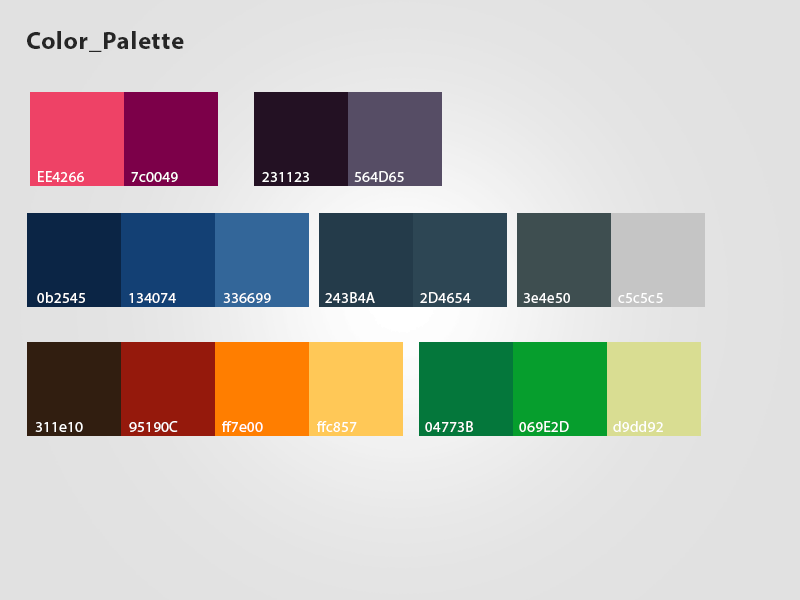
<style>
.page{position:relative;width:800px;height:600px}
.page>*{position:absolute;margin:0}
.t1{font:25px "MyriadPro-Bold";letter-spacing:0.025em;color:#262626}
.t2{font:15px "MyriadPro-Regular";letter-spacing:0.025em;color:#ffffff}
</style>
<div class="page">
<p class="t1" style="left:27px;top:31px;width:157px;height:21px">Color_Palette</p>
<p class="t2" style="left:38px;top:171px;width:46px;height:11px">EE4266</p>
<p class="t2" style="left:131px;top:172px;width:47px;height:10px">7c0049</p>
<p class="t2" style="left:262px;top:172px;width:47px;height:10px">231123</p>
<p class="t2" style="left:354px;top:171px;width:50px;height:11px">564D65</p>
<p class="t2" style="left:37px;top:292px;width:48px;height:11px">0b2545</p>
<p class="t2" style="left:129px;top:293px;width:47px;height:10px">134074</p>
<p class="t2" style="left:223px;top:293px;width:48px;height:10px">336699</p>
<p class="t2" style="left:325px;top:292px;width:50px;height:11px">243B4A</p>
<p class="t2" style="left:420px;top:292px;width:51px;height:11px">2D4654</p>
<p class="t2" style="left:523px;top:293px;width:47px;height:10px">3e4e50</p>
<p class="t2" style="left:618px;top:293px;width:45px;height:10px">c5c5c5</p>
<p class="t2" style="left:35px;top:422px;width:48px;height:10px">311e10</p>
<p class="t2" style="left:129px;top:421px;width:49px;height:11px">95190C</p>
<p class="t2" style="left:222px;top:421px;width:41px;height:11px">ff7e00</p>
<p class="t2" style="left:317px;top:421px;width:40px;height:11px">ffc857</p>
<p class="t2" style="left:425px;top:421px;width:48px;height:11px">04773B</p>
<p class="t2" style="left:519px;top:421px;width:50px;height:11px">069E2D</p>
<p class="t2" style="left:613px;top:421px;width:50px;height:11px">d9dd92</p>
</div>
